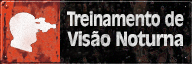
<style>
.page{position:relative;width:192px;height:64px}
.page>*{position:absolute;margin:0}
.t1{font:19.6px "Ravenna-Serial-ExtraBold-Regular";color:#dfdfdf;scale:0.76 1}
.t2{font:19.6px "Ravenna-Serial-ExtraBold-Regular";color:#dadada;scale:0.86 1}
.t3{font:19.6px "Ravenna-Serial-ExtraBold-Regular";color:#dadada;scale:0.71 1}
</style>
<div class="page">
<p class="t1" style="left:67px;top:11px;width:117px;height:16px">Treinamento de</p>
<p class="t2" style="left:67px;top:31px;width:116px;height:16px"><span class="t3"><br></span>Visão Noturna</p>
</div>
